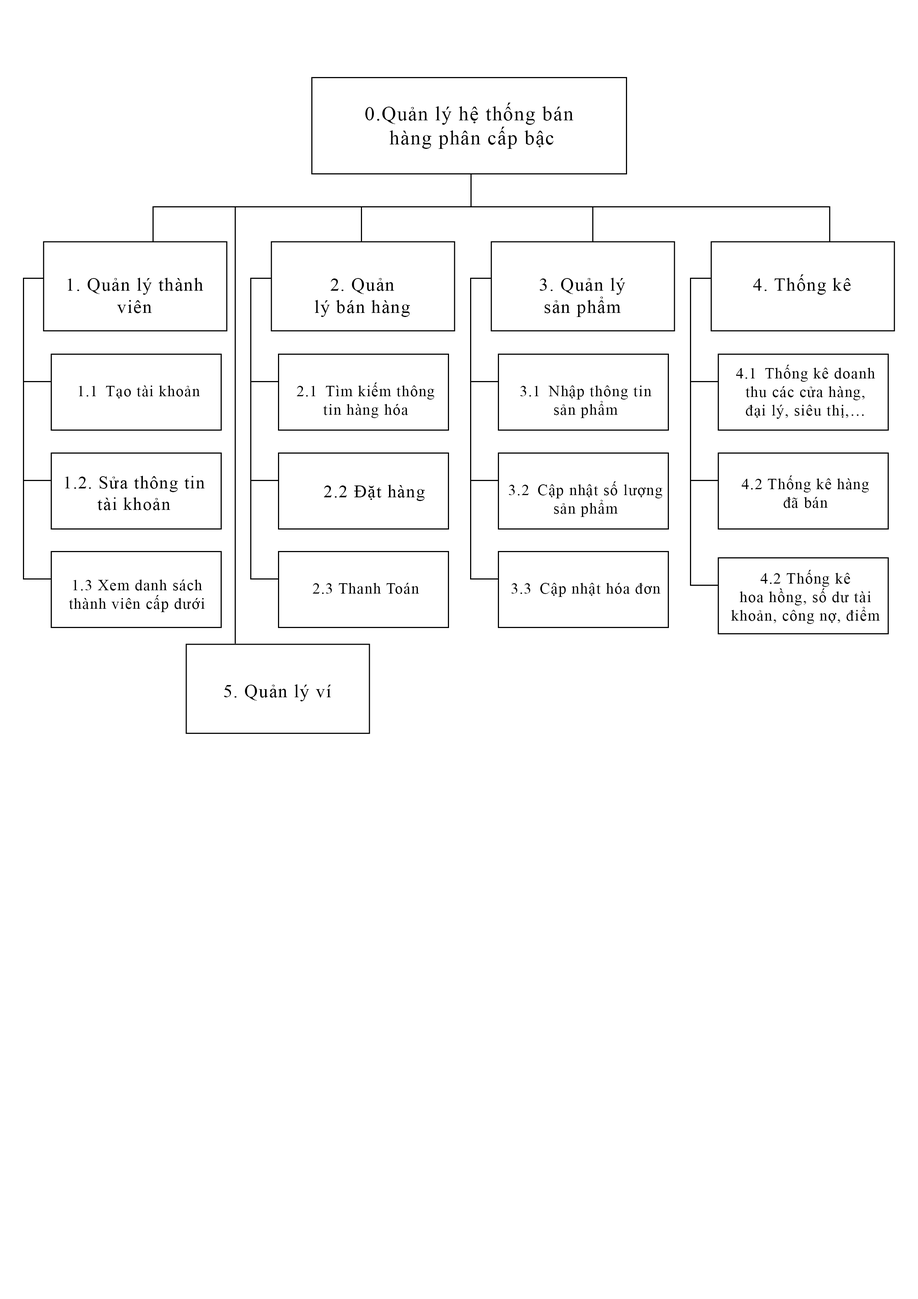
<style>
.page{position:relative;width:918px;height:1299px;background:#ffffff}
.page>*{position:absolute;margin:0}
.t1{font:20.1px "TimesNewRomanPSMT";letter-spacing:0.05em;color:#000000}
.t2{font:18.6px "TimesNewRomanPSMT";letter-spacing:0.05em;color:#000000}
.t3{font:15.4px "TimesNewRomanPSMT";letter-spacing:0.05em;color:#000000}
.t4{font:17.8px "TimesNewRomanPSMT";letter-spacing:0.05em;color:#000000}
</style>
<div class="page">
<p class="t1" style="left:365px;top:103px;width:208px;height:46px;text-align:center">0.Quản lý hệ thống bán <br>hàng phân cấp bậc</p>
<p class="t2" style="left:68px;top:278px;width:135px;height:35px;text-align:center">1. Quản lý thành<br>viên</p>
<p class="t2" style="left:315px;top:278px;width:95px;height:39px;text-align:center">2. Quản<br>lý bán hàng</p>
<p class="t2" style="left:540px;top:278px;width:85px;height:39px;text-align:center">3. Quản lý<br>sản phẩm</p>
<p class="t2" style="left:753px;top:274px;width:98px;height:21px">4. Thống kê</p>
<p class="t3" style="left:736px;top:365px;width:139px;height:54px;text-align:center">4.1  Thống kê doanh<br>thu các cửa hàng,<br>đại lý, siêu thị,…</p>
<p class="t3" style="left:79px;top:385px;width:121px;height:13px">1.1  Tạo tài khoản</p>
<p class="t3" style="left:297px;top:382px;width:138px;height:36px;text-align:center">2.1  Tìm kiếm thông<br>tin hàng hóa</p>
<p class="t3" style="left:520px;top:385px;width:132px;height:33px;text-align:center">3.1  Nhập thông tin<br>sản phẩm</p>
<p class="t4" style="left:65px;top:476px;width:140px;height:34px;text-align:center">1.2. Sửa thông tin<br>tài khoản</p>
<p class="t4" style="left:324px;top:485px;width:101px;height:16px">2.2 Đặt hàng</p>
<p class="t3" style="left:509px;top:481px;width:154px;height:36px;text-align:center">3.2  Cập nhật số lượng<br>sản phẩm</p>
<p class="t3" style="left:742px;top:475px;width:127px;height:33px;text-align:center">4.2 Thống kê hàng<br>đã bán</p>
<p class="t3" style="left:731px;top:570px;width:149px;height:54px;text-align:center">4.2 Thống kê<br>hoa hồng, số dư tài<br>khoản, công nợ, điểm</p>
<p class="t3" style="left:69px;top:579px;width:136px;height:33px;text-align:center">1.3 Xem danh sách<br>thành viên cấp dưới</p>
<p class="t3" style="left:313px;top:583px;width:106px;height:11px">2.3 Thanh Toán</p>
<p class="t3" style="left:511px;top:583px;width:149px;height:14px">3.3  Cập nhật hóa đơn</p>
<p class="t2" style="left:224px;top:684px;width:107px;height:17px">5. Quản lý ví</p>
</div>
